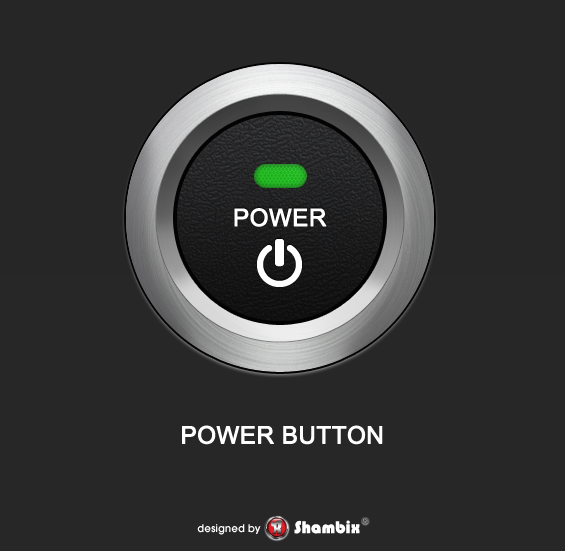
<style>
.page{position:relative;width:565px;height:551px;background:#272727}
.page>*{position:absolute;margin:0}
.t1{font:24px "ArialMT";color:#ffffff;text-transform:uppercase;font-weight:bold}
.t2{font:17.8px "Bauhaus93";color:#ffffff}
.t3{font:8.8px "HelveticaNeueLT-Medium";color:#4a4646}
.t4{font:10.5px "AvantGarde-Demi";color:#ffffff}
</style>
<div class="page">
<p class="t1" style="left:234px;top:208px;width:93px;height:19px">Power</p>
<p class="t1" style="left:182px;top:425px;width:201px;height:20px">Power Button</p>
<p class="t2" style="left:294px;top:520px;width:66px;height:14px">Shambix</p>
<p class="t3" style="left:362px;top:517px;width:7px;height:7px">®</p>
<p class="t4" style="left:197px;top:524px;width:64px;height:11px">designed by</p>
</div>
